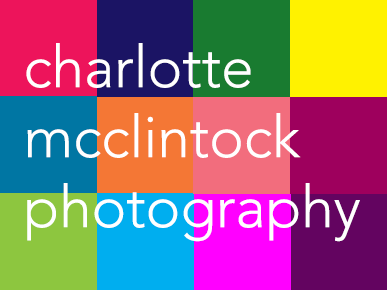
<style>
.page{position:relative;width:387px;height:290px}
.page>*{position:absolute;margin:0}
.t1{font:58.3px "Avenir-Light";color:#ffffff}
</style>
<div class="page">
<p class="t1" style="left:26px;top:43px;width:334px;height:199px">charlotte<br>mcclintock<br>photography</p>
</div>
